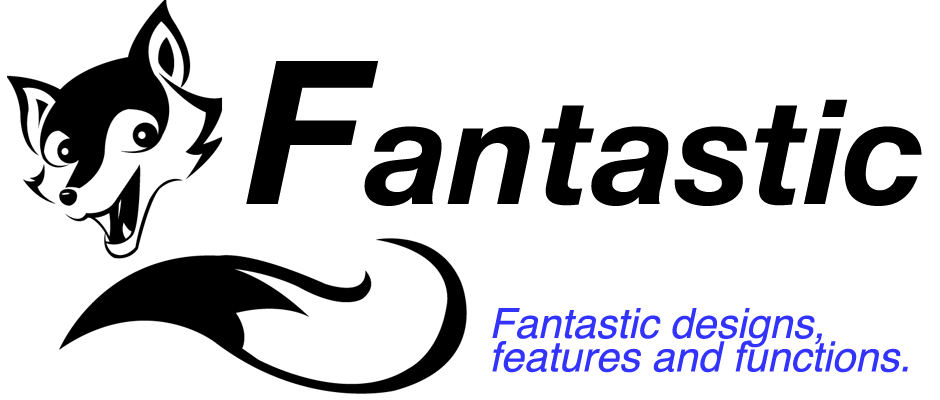
<style>
.page{position:relative;width:940px;height:400px;background:#ffffff}
.page>*{position:absolute;margin:0}
.t1{font:145.8px "HelveticaNeue-BoldItalic";color:#000000}
.t2{font:200px "HelveticaNeue-BoldItalic";color:#000000}
.t3{font:41.7px/33.3px "Helvetica-Oblique";color:#3333ff}
</style>
<div class="page">
<p class="t1" style="left:246px;top:61px;width:676px;height:145px"><span class="t2">F</span>antastic</p>
<p class="t3" style="left:492px;top:308px;width:416px;height:65px">Fantastic designs,<br>features and functions.</p>
</div>
